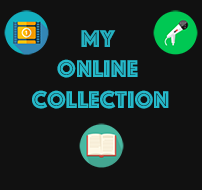
<style>
.page{position:relative;width:202px;height:190px;background:#111111}
.page>*{position:absolute;margin:0}
.t1{font:25.3px "Phosphate-Inline";color:#26bacb}
.t2{font:25.3px "Phosphate-Inline";color:#25b2c2}
</style>
<div class="page">
<p class="t1" style="left:32px;top:30px;width:137px;height:79px;text-align:center"><span class="t2">My <br></span>Online <br>Collection</p>
</div>
